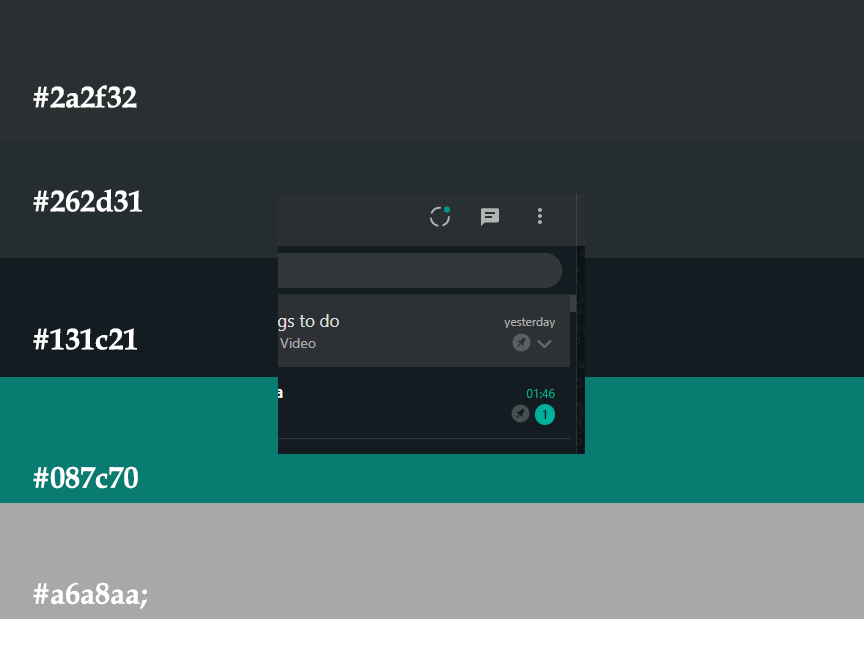
<style>
.page{position:relative;width:864px;height:648px;background:#2a2f32}
.page>*{position:absolute;margin:0}
.t1{font:30px "BookAntiqua-Bold";color:#ffffff}
</style>
<div class="page">
<p class="t1" style="left:33px;top:85px;width:104px;height:23px">#2a2f32</p>
<p class="t1" style="left:33px;top:189px;width:109px;height:23px">#262d31</p>
<p class="t1" style="left:33px;top:328px;width:104px;height:22px">#131c21</p>
<p class="t1" style="left:33px;top:466px;width:105px;height:23px">#087c70</p>
<p class="t1" style="left:33px;top:582px;width:114px;height:27px">#a6a8aa;</p>
</div>
